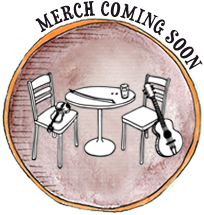
<style>
.page{position:relative;width:204px;height:215px;background:#ffffff}
.page>*{position:absolute;margin:0}
.t1{font:18px "Duality-Regular";letter-spacing:0.04em;color:#1c151d;text-transform:uppercase}
</style>
<div class="page">
<p class="t1" style="left:35px;top:1px;width:168px;height:69px;rotate:74deg">MERCH COMING SOON</p>
</div>
